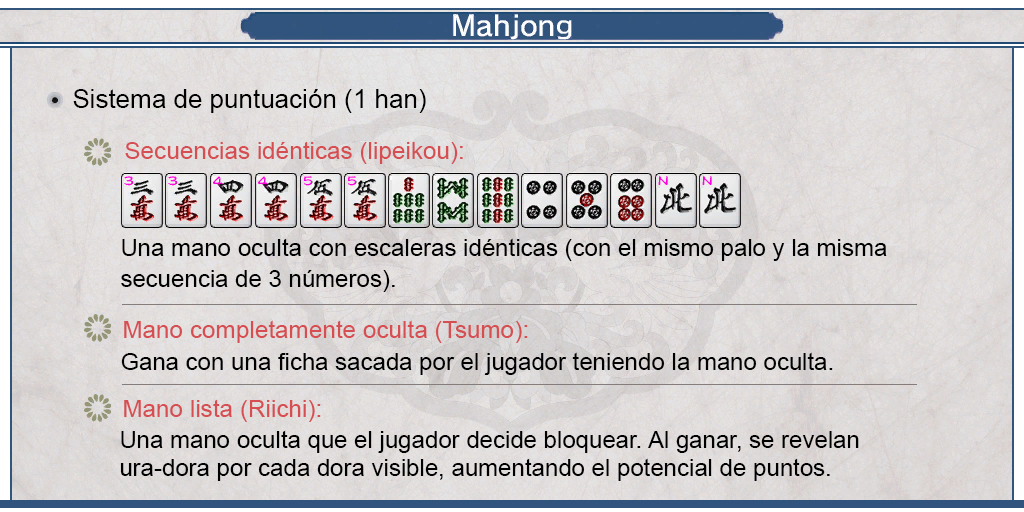
<style>
.page{position:relative;width:1024px;height:512px}
.page>*{position:absolute;margin:0}
.t1{font:26px "ArialMT";color:#000000}
.t2{font:24px "ArialMT";color:#d64d52}
.t3{font:24px/31px "ArialMT";color:#000000}
.t4{font:24px "ArialMT";color:#000000}
.t5{font:24px/28px "ArialMT";color:#000000}
</style>
<div class="page">
<p class="t1" style="left:73px;top:89px;width:353px;height:24px">Sistema de puntuación (1 han)</p>
<p class="t2" style="left:125px;top:141px;width:338px;height:23px">Secuencias idénticas (lipeikou):</p>
<p class="t3" style="left:121px;top:238px;width:766px;height:54px;text-align:justify">Una mano oculta con escaleras idénticas (con el mismo palo y la misma<br>secuencia de 3 números).</p>
<p class="t2" style="left:124px;top:320px;width:404px;height:23px">Mano completamente oculta (Tsumo):</p>
<p class="t4" style="left:121px;top:352px;width:712px;height:23px">Gana con una ficha sacada por el jugador teniendo la mano oculta.</p>
<p class="t2" style="left:124px;top:399px;width:197px;height:23px">Mano lista (Riichi):</p>
<p class="t5" style="left:120px;top:430px;width:739px;height:51px;text-align:justify">Una mano oculta que el jugador decide bloquear. Al ganar, se revelan <br>ura-dora por cada dora visible, aumentando el potencial de puntos.</p>
</div>
